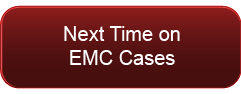
<style>
.page{position:relative;width:241px;height:94px}
.page>*{position:absolute;margin:0}
.t1{font:20px "ArialMT";color:#ffffff}
</style>
<div class="page">
<p class="t1" style="left:64px;top:26px;width:116px;height:39px;text-align:center">Next Time on<br>EMC Cases</p>
</div>
